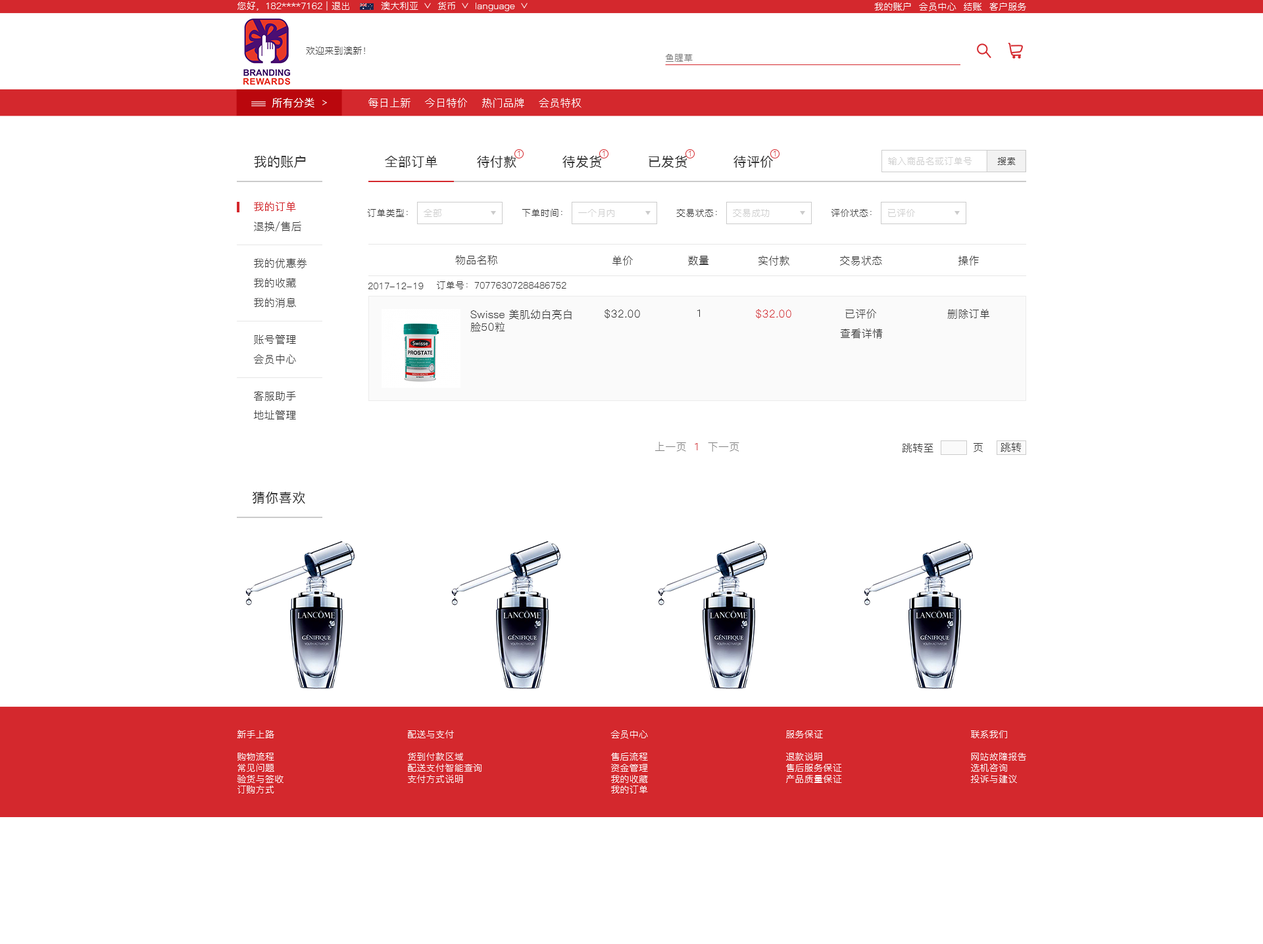
<style>
.page{position:relative;width:1263px;height:944px;background:#ffffff}
.page>*{position:absolute;margin:0}
.t1{font:9.2px "PingFang-SC-Regular";letter-spacing:0.02em;color:#ffffff}
.t2{font:9.2px "PingFang-SC-Regular";letter-spacing:0.02em;color:#333333}
.t3{font:9.2px "PingFang-SC-Regular";letter-spacing:0.02em;color:#767676}
.t4{font:10.5px "PingFang-SC-Medium";letter-spacing:0.02em;color:#ffffff}
.t5{font:10.5px "PingFang-SC-Regular";letter-spacing:0.02em;color:#ffffff}
.t6{font:13.2px "PingFang-SC-Medium";letter-spacing:0.02em;color:#333333}
.t7{font:7.9px "PingFang-SC-Regular";letter-spacing:0.02em;color:#d52d32}
.t8{font:9.2px "PingFang-SC-Regular";letter-spacing:0.02em;color:#cccccc}
.t9{font:10.5px "PingFang-SC-Medium";letter-spacing:0.02em;color:#d4282d}
.t10{font:10.5px "PingFang-SC-Regular";letter-spacing:0.02em;color:#343434}
.t11{font:9.2px "PingFang-SC-Regular";letter-spacing:0.02em;color:#343434}
.t12{font:10.5px "PingFang-SC-Regular";letter-spacing:0.02em;color:#333333}
.t13{font:10.5px "PingFang-SC-Regular";letter-spacing:0.02em;color:#d4282d}
.t14{font:10.5px "PingFang-SC-Regular";letter-spacing:0.02em;color:#808080}
.t15{font:10.5px "PingFang-SC-Regular";letter-spacing:0.02em;color:#353535}
.t16{font:9.2px "PingFang-SC-Regular";letter-spacing:0.02em;color:#fffefe}
</style>
<div class="page">
<p class="t1" style="left:237px;top:1px;width:112px;height:10px">您好，182****7162 | 退出</p>
<p class="t1" style="left:381px;top:1px;width:37px;height:9px">澳大利亚</p>
<p class="t1" style="left:437px;top:2px;width:18px;height:8px">货币</p>
<p class="t1" style="left:475px;top:3px;width:40px;height:8px">language</p>
<p class="t1" style="left:874px;top:2px;width:152px;height:9px">我的账户  会员中心  结账  客户服务</p>
<p class="t2" style="left:306px;top:46px;width:59px;height:9px">欢迎来到澳新！</p>
<p class="t3" style="left:665px;top:54px;width:27px;height:8px">鱼腥草</p>
<p class="t4" style="left:272px;top:98px;width:42px;height:10px">所有分类</p>
<p class="t5" style="left:368px;top:98px;width:213px;height:10px">每日上新    今日特价    热门品牌    会员特权</p>
<p class="t6" style="left:254px;top:156px;width:52px;height:12px">我的账户</p>
<p class="t6" style="left:385px;top:156px;width:52px;height:12px">全部订单</p>
<p class="t6" style="left:477px;top:155px;width:39px;height:13px">待付款</p>
<p class="t7" style="left:518px;top:151px;width:2px;height:6px">1</p>
<p class="t6" style="left:562px;top:156px;width:39px;height:12px">待发货</p>
<p class="t7" style="left:602px;top:151px;width:2px;height:6px">1</p>
<p class="t6" style="left:648px;top:156px;width:39px;height:12px">已发货</p>
<p class="t7" style="left:689px;top:151px;width:2px;height:6px">1</p>
<p class="t6" style="left:733px;top:156px;width:40px;height:12px">待评价</p>
<p class="t7" style="left:773px;top:151px;width:2px;height:6px">1</p>
<p class="t8" style="left:888px;top:157px;width:84px;height:8px">输入商品名或订单号</p>
<p class="t2" style="left:997px;top:157px;width:18px;height:8px">搜索</p>
<p class="t9" style="left:254px;top:202px;width:42px;height:10px">我的订单</p>
<p class="t2" style="left:367px;top:209px;width:41px;height:8px">订单类型：</p>
<p class="t8" style="left:424px;top:209px;width:17px;height:8px">全部</p>
<p class="t2" style="left:522px;top:208px;width:40px;height:9px">下单时间：</p>
<p class="t8" style="left:578px;top:209px;width:36px;height:8px">一个月内</p>
<p class="t2" style="left:676px;top:208px;width:41px;height:9px">交易状态：</p>
<p class="t8" style="left:733px;top:208px;width:36px;height:9px">交易成功</p>
<p class="t2" style="left:831px;top:208px;width:40px;height:9px">评价状态：</p>
<p class="t8" style="left:888px;top:209px;width:27px;height:8px">已评价</p>
<p class="t10" style="left:254px;top:222px;width:47px;height:9px">退换/售后</p>
<p class="t10" style="left:455px;top:255px;width:42px;height:10px">物品名称</p>
<p class="t10" style="left:612px;top:256px;width:21px;height:10px">单价</p>
<p class="t10" style="left:688px;top:256px;width:21px;height:10px">数量</p>
<p class="t10" style="left:758px;top:256px;width:31px;height:10px">实付款</p>
<p class="t10" style="left:840px;top:256px;width:42px;height:10px">交易状态</p>
<p class="t10" style="left:958px;top:256px;width:21px;height:10px">操作</p>
<p class="t10" style="left:254px;top:258px;width:52px;height:10px">我的优惠券</p>
<p class="t10" style="left:254px;top:278px;width:42px;height:10px">我的收藏</p>
<p class="t11" style="left:437px;top:281px;width:129px;height:8px">订单号：70776307288486752</p>
<p class="t11" style="left:368px;top:283px;width:56px;height:6px">2017-12-19</p>
<p class="t10" style="left:254px;top:298px;width:42px;height:10px">我的消息</p>
<p class="t12" style="left:470px;top:310px;width:101px;height:22px">Swisse 美肌幼白亮白<br>脸50粒</p>
<p class="t10" style="left:604px;top:309px;width:36px;height:10px">$32.00</p>
<p class="t10" style="left:697px;top:310px;width:3px;height:7px">1</p>
<p class="t13" style="left:756px;top:309px;width:35px;height:10px">$32.00</p>
<p class="t10" style="left:845px;top:309px;width:31px;height:10px">已评价</p>
<p class="t12" style="left:947px;top:309px;width:42px;height:10px">删除订单</p>
<p class="t10" style="left:840px;top:329px;width:43px;height:10px">查看详情</p>
<p class="t10" style="left:254px;top:335px;width:42px;height:10px">账号管理</p>
<p class="t10" style="left:253px;top:354px;width:43px;height:10px">会员中心</p>
<p class="t10" style="left:254px;top:391px;width:42px;height:10px">客服助手</p>
<p class="t10" style="left:254px;top:410px;width:42px;height:10px">地址管理</p>
<p class="t14" style="left:655px;top:442px;width:84px;height:10px">上一页<span class="t13">  1  </span>下一页</p>
<p class="t15" style="left:902px;top:443px;width:31px;height:10px">跳转至</p>
<p class="t15" style="left:973px;top:443px;width:10px;height:9px">页</p>
<p class="t15" style="left:1000px;top:443px;width:21px;height:9px">跳转</p>
<p class="t6" style="left:253px;top:491px;width:52px;height:13px">猜你喜欢</p>
<p class="t16" style="left:237px;top:730px;width:46px;height:64px">新手上路<br><br>购物流程<br>常见问题<br>验货与签收<br>订购方式</p>
<p class="t16" style="left:408px;top:730px;width:73px;height:53px">配送与支付<br><br>货到付款区域<br>配送支付智能查询<br>支付方式说明</p>
<p class="t16" style="left:610px;top:731px;width:38px;height:63px">会员中心<br><br>售后流程<br>资金管理<br>我的收藏<br>我的订单</p>
<p class="t16" style="left:786px;top:731px;width:56px;height:52px">服务保证<br><br>退款说明<br>售后服务保证<br>产品质量保证</p>
<p class="t16" style="left:970px;top:731px;width:56px;height:52px">联系我们<br><br>网站故障报告<br>选机咨询<br>投诉与建议</p>
</div>
